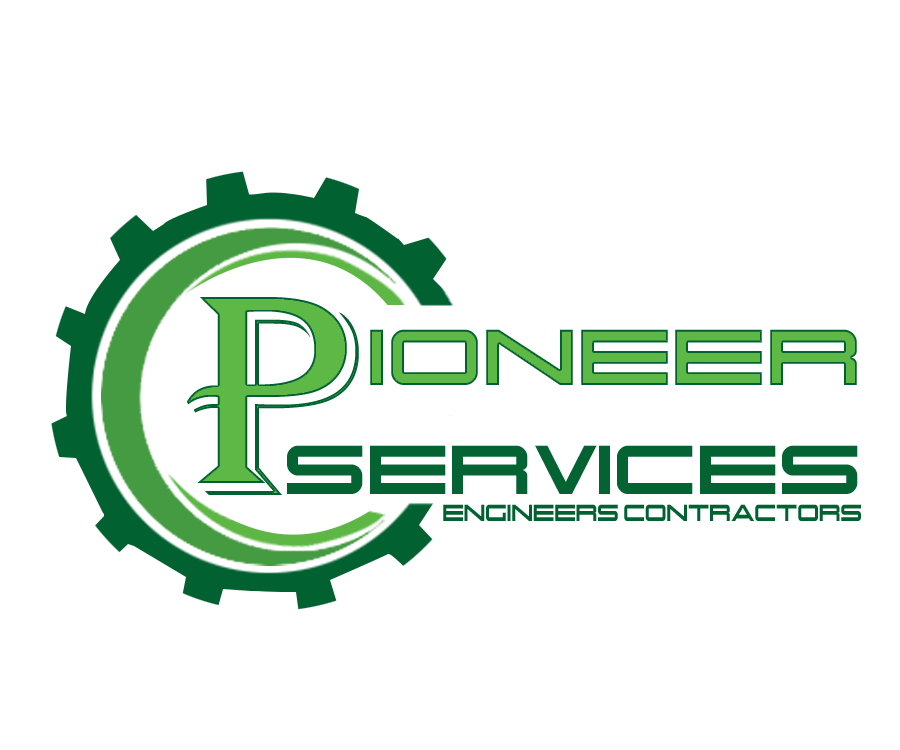
<style>
.page{position:relative;width:900px;height:750px;background:#ffffff}
.page>*{position:absolute;margin:0}
.t1{font:297.3px "Algerian";color:#5eb845;text-transform:uppercase}
.t2{font:79px "Otomo-Regular";color:#5eb845;text-transform:uppercase}
.t3{font:68.8px "Otomo-Regular";color:#036333;text-transform:uppercase}
.t4{font:23.2px "Otomo-Regular";color:#016131;text-transform:uppercase;scale:0.77 1}
</style>
<div class="page">
<p class="t1" style="left:186px;top:297px;width:173px;height:198px">p</p>
<p class="t2" style="left:370px;top:329px;width:487px;height:56px">ioneer</p>
<p class="t3" style="left:287px;top:445px;width:571px;height:49px">Services</p>
<p class="t4" style="left:443px;top:504px;width:418px;height:17px">Engineers Contractors</p>
</div>
